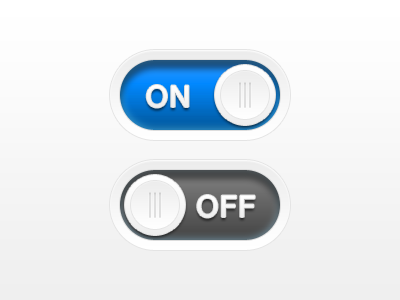
<style>
.page{position:relative;width:400px;height:300px}
.page>*{position:absolute;margin:0}
.t1{font:30px "HelveticaNeue-Medium";letter-spacing:0.03em;color:#ffffff}
</style>
<div class="page">
<p class="t1" style="left:146px;top:85px;width:43px;height:23px">ON</p>
<p class="t1" style="left:197px;top:195px;width:58px;height:23px">OFF</p>
</div>
